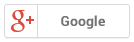
<style>
.page{position:relative;width:134px;height:42px;background:#ffffff}
.page>*{position:absolute;margin:0}
.t1{font:14px "Roboto-Bold";letter-spacing:0.01em;color:#737373}
.t2{font:14px "Roboto-Bold";letter-spacing:0.05em;color:#737373}
</style>
<div class="page">
<p class="t1" style="left:61px;top:15px;width:44px;height:14px">Googl<span class="t2">e</span></p>
</div>
